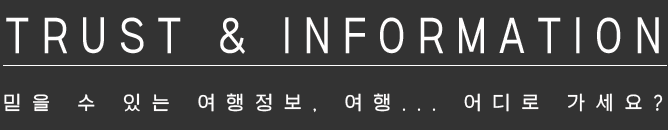
<style>
.page{position:relative;width:668px;height:130px;background:#333333}
.page>*{position:absolute;margin:0}
.t1{font:48px "TTBitbangulR";letter-spacing:0.3em;color:#fffefe;scale:0.85 1}
.t2{font:22px "TTBitbangulR";letter-spacing:0.55em;color:#fffefe;scale:0.91 1}
</style>
<div class="page">
<p class="t1" style="left:6px;top:17px;width:653px;height:37px">TRUST &amp; INFORMATION</p>
<p class="t2" style="left:4px;top:93px;width:659px;height:20px">믿을 수 있는 여행정보, 여행... 어디로 가세요?</p>
</div>
